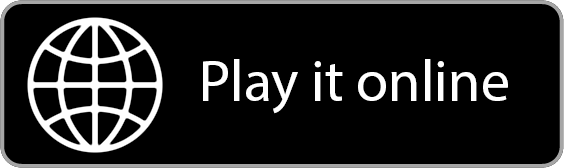
<style>
.page{position:relative;width:564px;height:168px;background:#000000}
.page>*{position:absolute;margin:0}
.t1{font:58.3px "MyriadPro-Regular";color:#ffffff}
</style>
<div class="page">
<p class="t1" style="left:203px;top:59px;width:305px;height:55px">Play it online</p>
</div>
